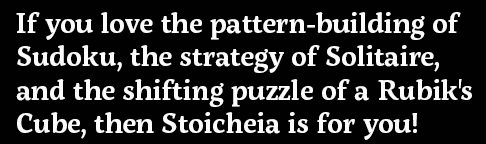
<style>
.page{position:relative;width:486px;height:144px;background:#010101}
.page>*{position:absolute;margin:0}
.t1{font:28px "ServusSlab-SemiBold";color:#fbfbfb}
</style>
<div class="page">
<p class="t1" style="left:16px;top:12px;width:456px;height:128px">If you love the pattern-building of Sudoku, the strategy of Solitaire, <br>and the shifting puzzle of a Rubik's Cube, then Stoicheia is for you!</p>
</div>
